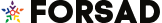
<style>
.page{position:relative;width:162px;height:23px;background:#0c0b08}
.page>*{position:absolute;margin:0}
.t1{font:32.2px "FONTSPRINGDEMO-CodeProBoldRegular";letter-spacing:0.02em;color:#0c0b08}
</style>
<div class="page">
<p class="t1" style="left:31px;top:0px;width:129px;height:23px">forsad</p>
</div>
